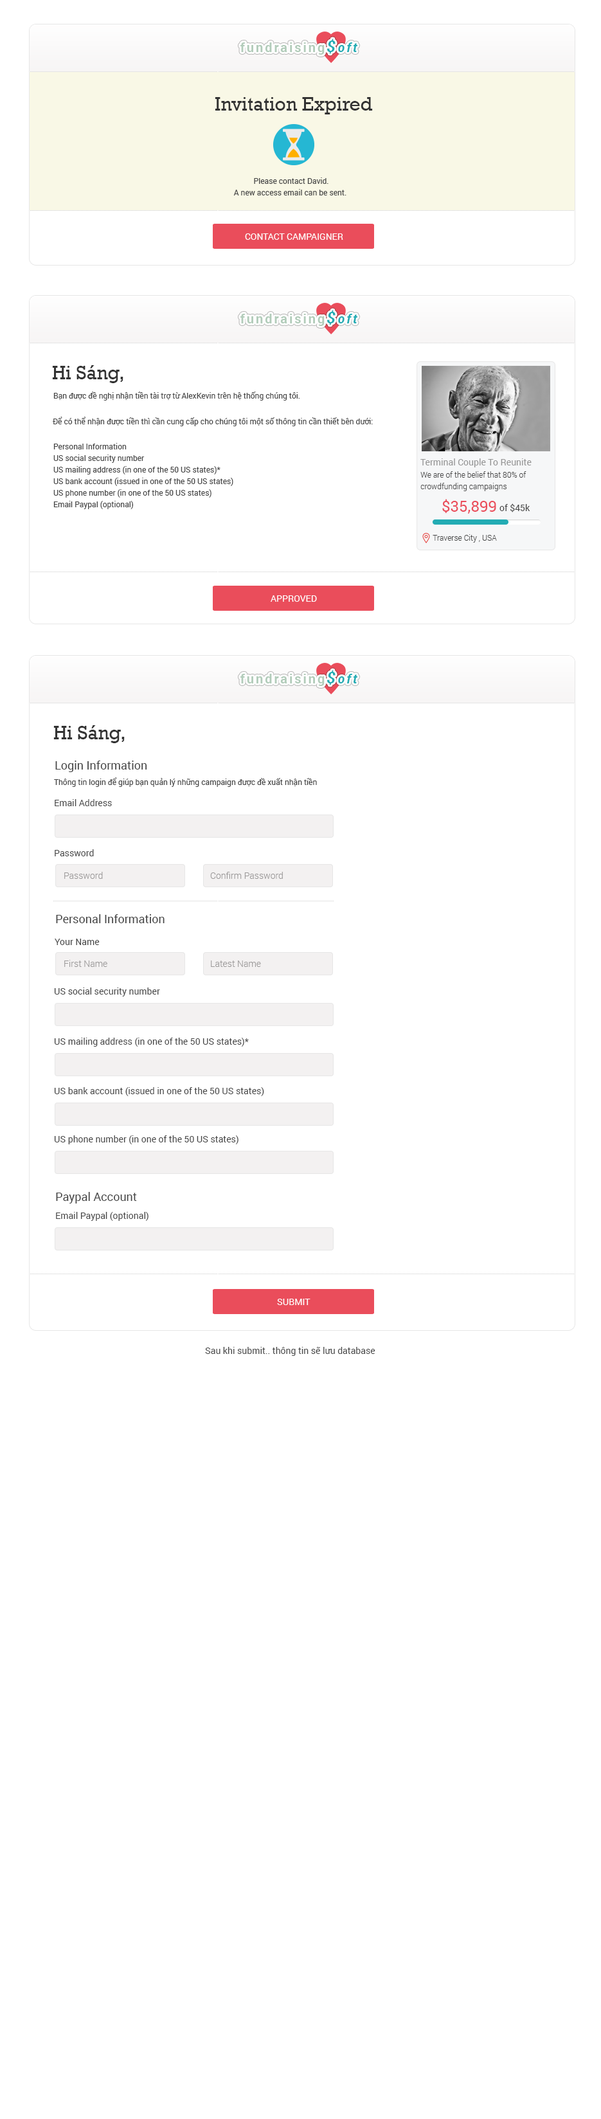
<style>
.page{position:relative;width:601px;height:2119px;background:#ffffff}
.page>*{position:absolute;margin:0}
.t1{font:19.3px "Rockwell";color:#333333}
.t2{font:7.7px/11.6px "Roboto-Regular";color:#464646}
.t3{font:9px "Roboto-Regular";color:#ffffff;text-transform:uppercase}
.t4{font:7.7px "Roboto-Regular";color:#464646}
.t5{font:9px "Roboto-Regular";color:#959595}
.t6{font:7.7px/11.6px "Roboto-Light";color:#464646}
.t7{font:15.4px "Roboto-Regular";color:#ea4d5b}
.t8{font:9px "Roboto-Regular";color:#464646}
.t9{font:7.7px "Roboto-Light";color:#464646}
.t10{font:11.6px "Roboto-Regular";color:#464646}
.t11{font:9px "Roboto-Light";color:#9b9999}
</style>
<div class="page">
<p class="t1" style="left:215px;top:97px;width:158px;height:17px">Invitation Expired</p>
<p class="t2" style="left:233px;top:177px;width:113px;height:18px;text-align:center">Please contact David.<br>A new access email can be sent.</p>
<p class="t3" style="left:245px;top:233px;width:98px;height:7px">CONTACT CAMPAIGNER</p>
<p class="t1" style="left:52px;top:365px;width:71px;height:18px">Hi Sáng,</p>
<p class="t4" style="left:53px;top:392px;width:247px;height:9px">Bạn được đề nghị nhận tiền tài trợ từ AlexKevin trên hệ thống chúng tôi.</p>
<p class="t4" style="left:53px;top:417px;width:320px;height:9px">Để có thể nhận được tiền thì cần cung cấp cho chúng tôi một số thông tin cần thiết bên dưới:</p>
<p class="t2" style="left:53px;top:443px;width:180px;height:66px">Personal Information<br>US social security number<br>US mailing address (in one of the 50 US states)*<br>US bank account (issued in one of the 50 US states)<br>US phone number (in one of the 50 US states)<br>Email Paypal (optional)</p>
<p class="t5" style="left:420px;top:458px;width:112px;height:9px">Terminal Couple To Reunite</p>
<p class="t6" style="left:420px;top:471px;width:106px;height:20px">We are of the belief that 80% of crowdfunding campaigns</p>
<p class="t7" style="left:442px;top:499px;width:54px;height:15px">$35,899</p>
<p class="t8" style="left:500px;top:503px;width:30px;height:9px">of $45k</p>
<p class="t9" style="left:433px;top:534px;width:64px;height:9px">Traverse City , USA</p>
<p class="t3" style="left:271px;top:595px;width:46px;height:7px">Approved</p>
<p class="t1" style="left:53px;top:725px;width:72px;height:18px">Hi Sáng,</p>
<p class="t10" style="left:55px;top:760px;width:92px;height:12px">Login Information</p>
<p class="t4" style="left:54px;top:777px;width:263px;height:10px">Thông tin login để giúp bạn quản lý những campaign được đề xuất nhận tiền</p>
<p class="t8" style="left:55px;top:799px;width:57px;height:7px">Email Address</p>
<p class="t8" style="left:55px;top:849px;width:39px;height:7px">Password</p>
<p class="t11" style="left:64px;top:872px;width:39px;height:7px">Password</p>
<p class="t11" style="left:210px;top:872px;width:73px;height:7px">Confirm Password</p>
<p class="t10" style="left:56px;top:914px;width:109px;height:9px">Personal Information</p>
<p class="t8" style="left:55px;top:939px;width:45px;height:6px">Your Name</p>
<p class="t11" style="left:64px;top:960px;width:43px;height:7px">First Name</p>
<p class="t11" style="left:211px;top:960px;width:50px;height:7px">Latest Name</p>
<p class="t8" style="left:54px;top:987px;width:106px;height:9px">US social security number</p>
<p class="t8" style="left:54px;top:1038px;width:195px;height:9px">US mailing address (in one of the 50 US states)*</p>
<p class="t8" style="left:54px;top:1087px;width:210px;height:9px">US bank account (issued in one of the 50 US states)</p>
<p class="t8" style="left:54px;top:1135px;width:185px;height:9px">US phone number (in one of the 50 US states)</p>
<p class="t10" style="left:56px;top:1192px;width:81px;height:11px">Paypal Account</p>
<p class="t8" style="left:56px;top:1212px;width:92px;height:9px">Email Paypal (optional)</p>
<p class="t3" style="left:277px;top:1299px;width:33px;height:6px">submit</p>
<p class="t8" style="left:205px;top:1347px;width:170px;height:9px">Sau khi submit.. thông tin sẽ lưu database</p>
</div>
